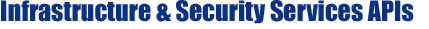
<style>
.page{position:relative;width:429px;height:29px;background:#ffffff}
.page>*{position:absolute;margin:0}
.t1{font:26px "Impact";color:#093282}
</style>
<div class="page">
<p class="t1" style="left:1px;top:0px;width:413px;height:24px">Infrastructure &amp; Security Services APIs</p>
</div>
